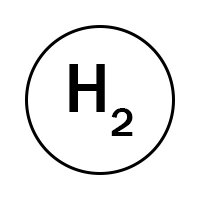
<style>
.page{position:relative;width:200px;height:200px;background:#ffffff}
.page>*{position:absolute;margin:0}
.t1{font:72px "FranklinGothic-Medium";color:#000000}
</style>
<div class="page">
<p class="t1" style="left:69px;top:64px;width:64px;height:72px">H2</p>
</div>
